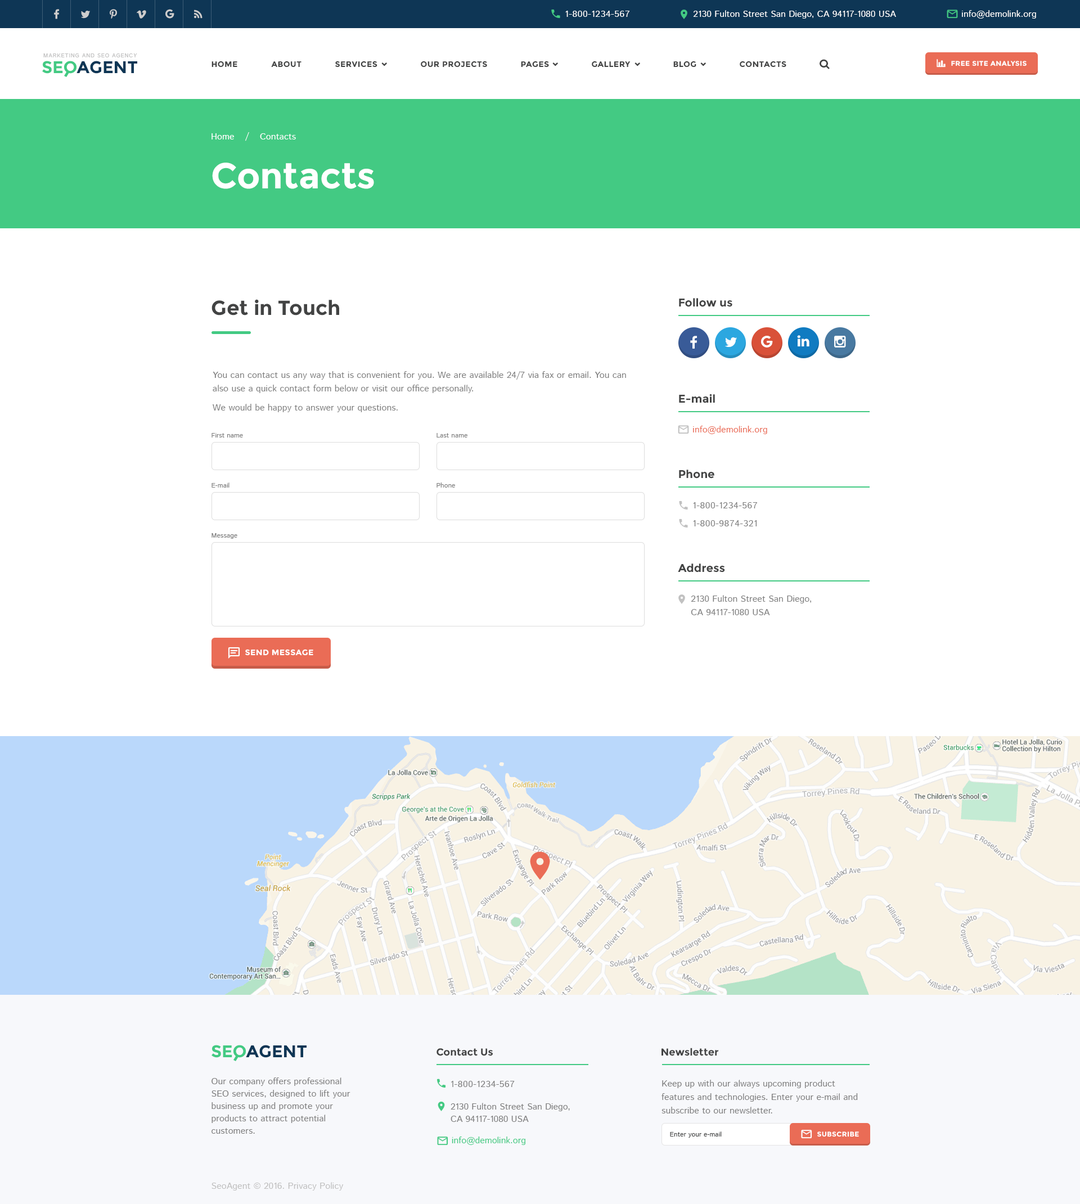
<style>
.page{position:relative;width:1080px;height:1204px;background:#ffffff}
.page>*{position:absolute;margin:0}
.t1{font:9px "IstokWeb-Regular";letter-spacing:0.04em;color:#ffffff;text-transform:uppercase}
.t2{font:9px "IstokWeb-Regular";color:#ffffff}
.t3{font:5.6px "IstokWeb-Regular";letter-spacing:0.08em;color:#c1c1c1;text-transform:uppercase}
.t4{font:16.9px "Montserrat-Bold";color:#43ca83}
.t5{font:16.9px "Montserrat-Bold";color:#0e3655}
.t6{font:7.9px "Montserrat-Bold";letter-spacing:0.04em;color:#424343;text-transform:uppercase}
.t7{font:6.7px "Montserrat-Bold";letter-spacing:0.04em;color:#ffffff;text-transform:uppercase}
.t8{font:36px "Montserrat-Bold";color:#ffffff}
.t9{font:20.2px "Montserrat-Bold";color:#424343}
.t10{font:11.3px "Montserrat-Bold";color:#424343}
.t11{font:9px/13.5px "IstokWeb-Regular";color:#7f7f7f}
.t12{font:9px "IstokWeb-Regular";color:#ea6c56}
.t13{font:6.8px "IstokWeb-Regular";color:#7f7f7f}
.t14{font:9px "IstokWeb-Regular";letter-spacing:0.04em;color:#7f7f7f;text-transform:uppercase}
.t15{font:7.9px "Montserrat-Bold";letter-spacing:0.04em;color:#ffffff;text-transform:uppercase}
.t16{font:10.1px "Montserrat-Bold";color:#424343}
.t17{font:9px/12.4px "IstokWeb-Regular";color:#7f7f7f}
.t18{font:6.8px "IstokWeb-Regular";color:#424343}
.t19{font:9px "IstokWeb-Regular";color:#43ca83}
.t20{font:9px "IstokWeb-Regular";color:#c0c0c0}
</style>
<div class="page">
<p class="t1" style="left:565px;top:11px;width:64px;height:6px">1-800-1234-567</p>
<p class="t2" style="left:693px;top:10px;width:203px;height:9px">2130 Fulton Street San Diego, CA 94117-1080 USA</p>
<p class="t2" style="left:962px;top:10px;width:74px;height:9px">info@demolink.org</p>
<p class="t3" style="left:43px;top:53px;width:94px;height:4px">Marketing and SEO agency</p>
<p class="t4" style="left:42px;top:61px;width:34px;height:13px">SEO</p>
<p class="t5" style="left:76px;top:61px;width:61px;height:13px">AGENT</p>
<p class="t6" style="left:212px;top:61px;width:25px;height:7px">Home</p>
<p class="t6" style="left:271px;top:61px;width:31px;height:7px">about</p>
<p class="t6" style="left:335px;top:61px;width:42px;height:7px">services</p>
<p class="t6" style="left:421px;top:61px;width:66px;height:7px">our projects</p>
<p class="t6" style="left:521px;top:61px;width:28px;height:7px">pages</p>
<p class="t6" style="left:592px;top:61px;width:39px;height:7px">gallery</p>
<p class="t6" style="left:673px;top:61px;width:23px;height:7px">blog</p>
<p class="t6" style="left:740px;top:61px;width:46px;height:7px">contacts</p>
<p class="t7" style="left:951px;top:61px;width:76px;height:5px">Free Site Analysis</p>
<p class="t2" style="left:212px;top:133px;width:22px;height:7px">Home</p>
<p class="t2" style="left:245px;top:132px;width:4px;height:9px">/</p>
<p class="t2" style="left:260px;top:133px;width:36px;height:7px">Contacts</p>
<p class="t8" style="left:212px;top:163px;width:162px;height:26px">Contacts</p>
<p class="t9" style="left:212px;top:299px;width:127px;height:17px">Get in Touch</p>
<p class="t10" style="left:679px;top:298px;width:53px;height:9px">Follow us</p>
<p class="t11" style="left:213px;top:371px;width:413px;height:41px">You can contact us any way that is convenient for you. We are available 24/7 via fax or email. You can also use a quick contact form below or visit our office personally.<br>We would be happy to answer your questions.</p>
<p class="t10" style="left:679px;top:394px;width:36px;height:9px">E-mail</p>
<p class="t12" style="left:693px;top:426px;width:74px;height:8px">info@demolink.org</p>
<p class="t13" style="left:212px;top:433px;width:31px;height:5px">First name</p>
<p class="t13" style="left:436px;top:433px;width:31px;height:5px">Last name</p>
<p class="t10" style="left:679px;top:470px;width:35px;height:9px">Phone</p>
<p class="t13" style="left:212px;top:483px;width:18px;height:5px">E-mail</p>
<p class="t13" style="left:436px;top:483px;width:19px;height:5px">Phone</p>
<p class="t14" style="left:693px;top:502px;width:64px;height:6px">1-800-1234-567</p>
<p class="t14" style="left:693px;top:520px;width:64px;height:6px">1-800-9874-321</p>
<p class="t13" style="left:212px;top:533px;width:25px;height:6px">Message</p>
<p class="t10" style="left:678px;top:564px;width:47px;height:9px">Address</p>
<p class="t11" style="left:691px;top:595px;width:120px;height:20px">2130 Fulton Street San Diego,<br>CA 94117-1080 USA</p>
<p class="t15" style="left:245px;top:649px;width:68px;height:7px">send message</p>
<p class="t4" style="left:212px;top:1045px;width:34px;height:13px">SEO</p>
<p class="t5" style="left:246px;top:1045px;width:61px;height:13px">AGENT</p>
<p class="t16" style="left:436px;top:1048px;width:57px;height:8px">Contact Us</p>
<p class="t16" style="left:662px;top:1048px;width:56px;height:8px">Newsletter</p>
<p class="t17" style="left:212px;top:1078px;width:138px;height:56px">Our company offers professional SEO services, designed to lift your business up and promote your products to attract potential customers.</p>
<p class="t14" style="left:451px;top:1081px;width:64px;height:6px">1-800-1234-567</p>
<p class="t11" style="left:662px;top:1080px;width:196px;height:34px">Keep up with our always upcoming product features and technologies. Enter your e-mail and subscribe to our newsletter.</p>
<p class="t17" style="left:451px;top:1103px;width:119px;height:19px">2130 Fulton Street San Diego,<br>CA 94117-1080 USA</p>
<p class="t18" style="left:670px;top:1132px;width:52px;height:6px">Enter your e-mail</p>
<p class="t7" style="left:817px;top:1132px;width:42px;height:5px">subscribe</p>
<p class="t19" style="left:452px;top:1137px;width:73px;height:8px">info@demolink.org</p>
<p class="t20" style="left:212px;top:1182px;width:132px;height:9px">SeoAgent © 2016. Privacy Policy</p>
</div>
